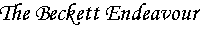
<style>
.page{position:relative;width:200px;height:32px;background:#ffffff}
.page>*{position:absolute;margin:0}
.t1{font:24px "MonotypeCorsiva";color:#000000}
</style>
<div class="page">
<p class="t1" style="left:0px;top:3px;width:201px;height:22px">The Beckett Endeavour</p>
</div>
